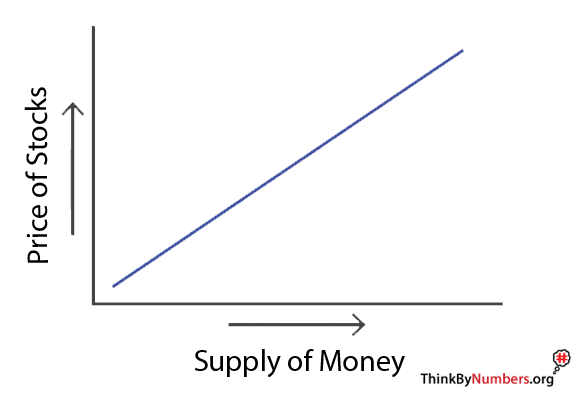
<style>
.page{position:relative;width:576px;height:396px;background:#ffffff}
.page>*{position:absolute;margin:0}
.t1{font:30px "MyriadPro-Regular";color:#000000}
</style>
<div class="page">
<p class="t1" style="left:24px;top:87px;width:24px;height:176px;rotate:-90deg">Price of Stocks</p>
<p class="t1" style="left:194px;top:349px;width:211px;height:29px">Supply of Money</p>
</div>
